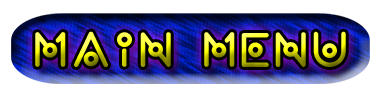
<style>
.page{position:relative;width:380px;height:97px;background:#ffffff}
.page>*{position:absolute;margin:0}
.t1{font:50px "wearealien!!"}
</style>
<div class="page">
<p class="t1" style="left:35px;top:31px;width:311px;height:36px">Main Menu</p>
</div>
